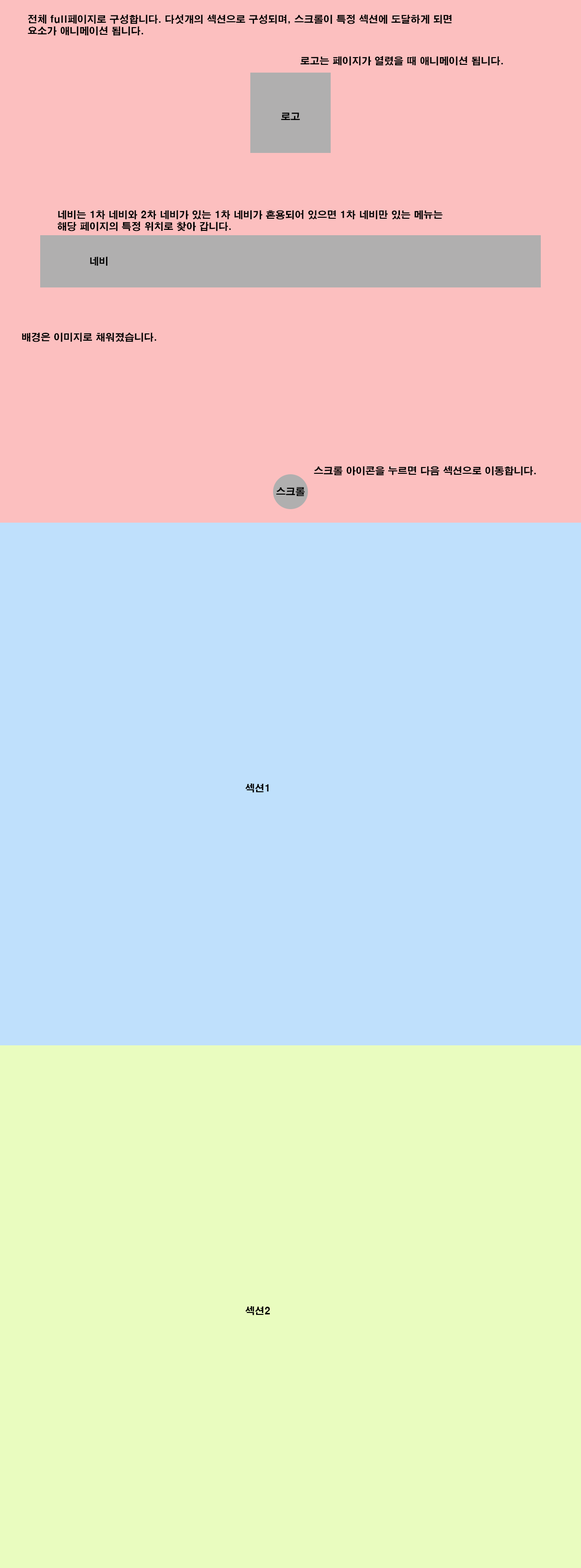
<style>
.page{position:relative;width:581px;height:1568px;background:#bfe0fc}
.page>*{position:absolute;margin:0}
.t1{font:9.7px "H2gtrE";color:#000000}
</style>
<div class="page">
<p class="t1" style="left:28px;top:15px;width:424px;height:21px;text-align:justify">전체 full페이지로 구성합니다. 다섯개의 섹션으로 구성되며, 스크롤이 특정 섹션에 도달하게 되면 <br>요소가 애니메이션 됩니다.</p>
<p class="t1" style="left:300px;top:56px;width:203px;height:10px">로고는 페이지가 열렸을 때 애니메이션 됩니다.</p>
<p class="t1" style="left:281px;top:112px;width:19px;height:8px">로고</p>
<p class="t1" style="left:58px;top:210px;width:384px;height:21px;text-align:justify">네비는 1차 네비와 2차 네비가 있는 1차 네비가 혼용되어 있으면 1차 네비만 있는 메뉴는<br>해당 페이지의 특정 위치로 찾아 갑니다.</p>
<p class="t1" style="left:90px;top:256px;width:18px;height:10px">네비</p>
<p class="t1" style="left:22px;top:332px;width:134px;height:10px">배경은 이미지로 채워졌습니다.</p>
<p class="t1" style="left:314px;top:466px;width:222px;height:10px">스크롤 아이콘을 누르면 다음 섹션으로 이동합니다.</p>
<p class="t1" style="left:276px;top:487px;width:29px;height:9px">스크롤</p>
<p class="t1" style="left:245px;top:784px;width:24px;height:9px">섹션1</p>
<p class="t1" style="left:245px;top:1306px;width:25px;height:9px">섹션2</p>
</div>
